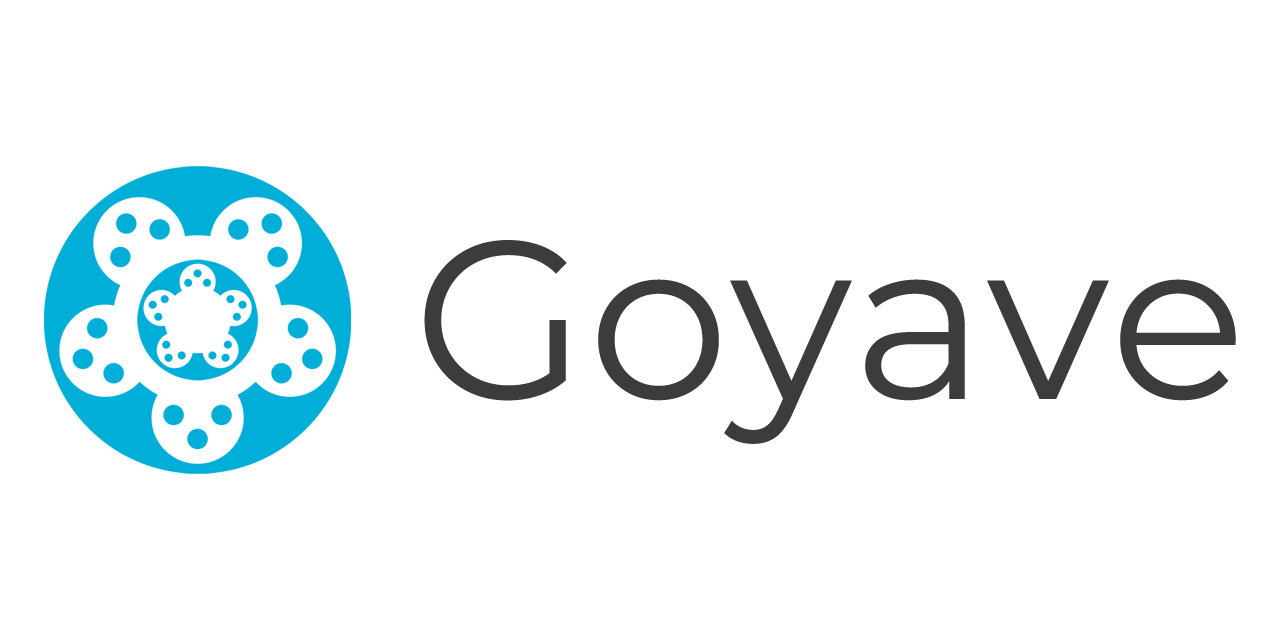
<style>
.page{position:relative;width:1280px;height:640px;background:#ffffff}
.page>*{position:absolute;margin:0}
.t1{font:225px "Montserrat-Regular";letter-spacing:0.005em;color:#3c3c3c}
</style>
<div class="page">
<p class="t1" style="left:424px;top:240px;width:812px;height:204px">Goyave</p>
</div>
